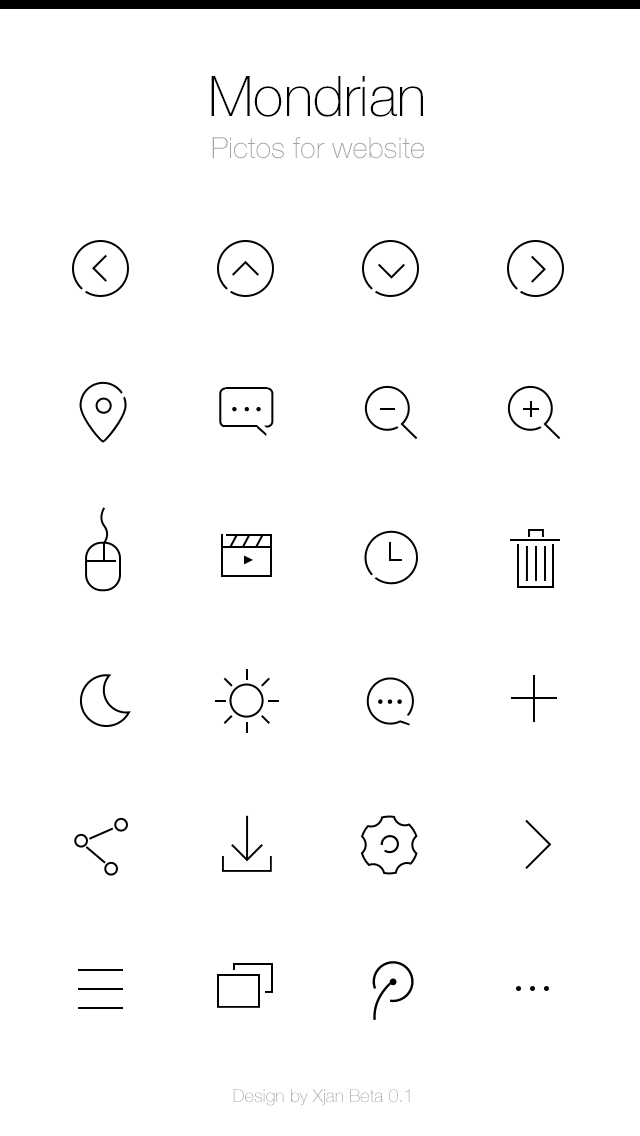
<style>
.page{position:relative;width:640px;height:1136px;background:#ffffff}
.page>*{position:absolute;margin:0}
.t1{font:56px "HelveticaNeueLTPro-Th";color:#000000}
.t2{font:29px "HelveticaNeueLTPro-Th";color:#a3a3a3}
.t3{font:18px "HelveticaNeueLTPro-Th";color:#a3a3a3}
</style>
<div class="page">
<p class="t1" style="left:211px;top:76px;width:212px;height:41px">Mondrian</p>
<p class="t2" style="left:212px;top:137px;width:212px;height:22px">Pictos for website</p>
<p class="t3" style="left:233px;top:1089px;width:177px;height:17px">Design by Xjan Beta 0.1</p>
</div>
